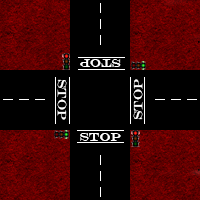
<style>
.page{position:relative;width:200px;height:200px;background:#000000}
.page>*{position:absolute;margin:0}
.t1{font:12.2px "EngraversMT";color:#ffffff}
.t2{font:12px "EngraversMT";color:#ffffff}
</style>
<div class="page">
<p class="t1" style="left:80px;top:59px;width:41px;height:8px;rotate:-180deg">Stop</p>
<p class="t1" style="left:57px;top:79px;width:10px;height:41px;rotate:90deg">Stop</p>
<p class="t1" style="left:133px;top:79px;width:10px;height:41px;rotate:-90deg">Stop</p>
<p class="t2" style="left:80px;top:133px;width:41px;height:8px">Stop</p>
</div>
